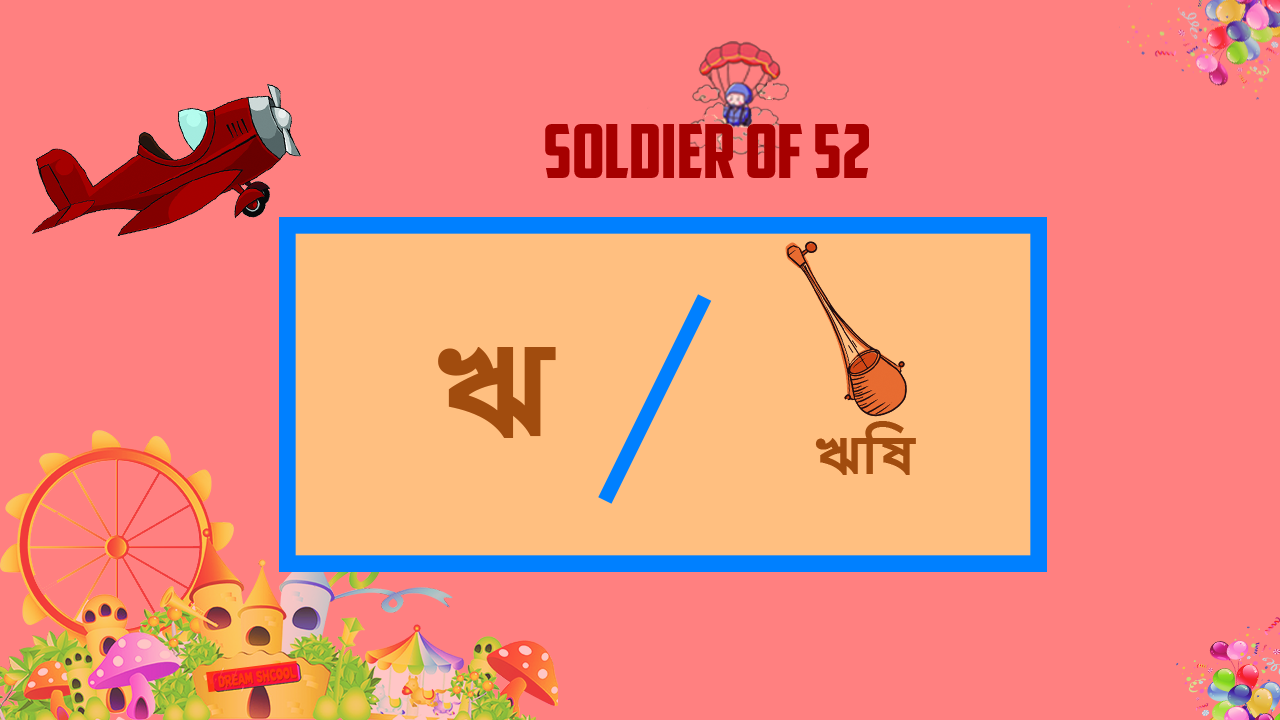
<style>
.page{position:relative;width:1280px;height:720px;background:#ff8080}
.page>*{position:absolute;margin:0}
.t1{font:74.5px "AmericanCaptain";color:#a60000}
.t2{font:122.1px "NirmalaUI-Bold";color:#a24b0d}
.t3{font:49.7px "NirmalaUI-Bold";color:#a24b0d}
</style>
<div class="page">
<p class="t1" style="left:545px;top:124px;width:324px;height:54px">SOLDIER OF 52</p>
<p class="t2" style="left:438px;top:347px;width:118px;height:91px">ঋ</p>
<p class="t3" style="left:815px;top:421px;width:101px;height:54px">ঋিষ</p>
</div>
